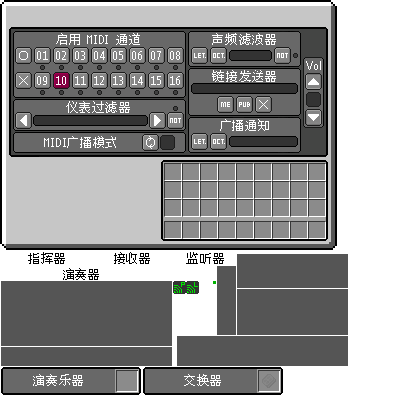
<style>
.page{position:relative;width:395px;height:395px;background:#ffffff}
.page>*{position:absolute;margin:0}
.t1{font:11.7px "mplus_hzk_12";color:#ffffff}
.t2{font:11.7px "mplus_hzk_12";color:#000000}
</style>
<div class="page">
<p class="t1" style="left:56px;top:33px;width:84px;height:12px">启用 MIDI 通道</p>
<p class="t1" style="left:212px;top:33px;width:64px;height:12px">声频滤波器</p>
<p class="t1" style="left:212px;top:70px;width:64px;height:12px">链接发送器</p>
<p class="t1" style="left:66px;top:101px;width:64px;height:12px">仪表过滤器</p>
<p class="t1" style="left:220px;top:119px;width:49px;height:12px">广播通知</p>
<p class="t1" style="left:44px;top:136px;width:72px;height:12px">MIDI广播模式</p>
<p class="t2" style="left:28px;top:252px;width:196px;height:12px">指挥器        接收器      监听器</p>
<p class="t2" style="left:63px;top:268px;width:36px;height:12px">演奏器</p>
<p class="t1" style="left:33px;top:374px;width:50px;height:12px">演奏乐器</p>
<p class="t1" style="left:184px;top:374px;width:37px;height:12px">交换器</p>
</div>
